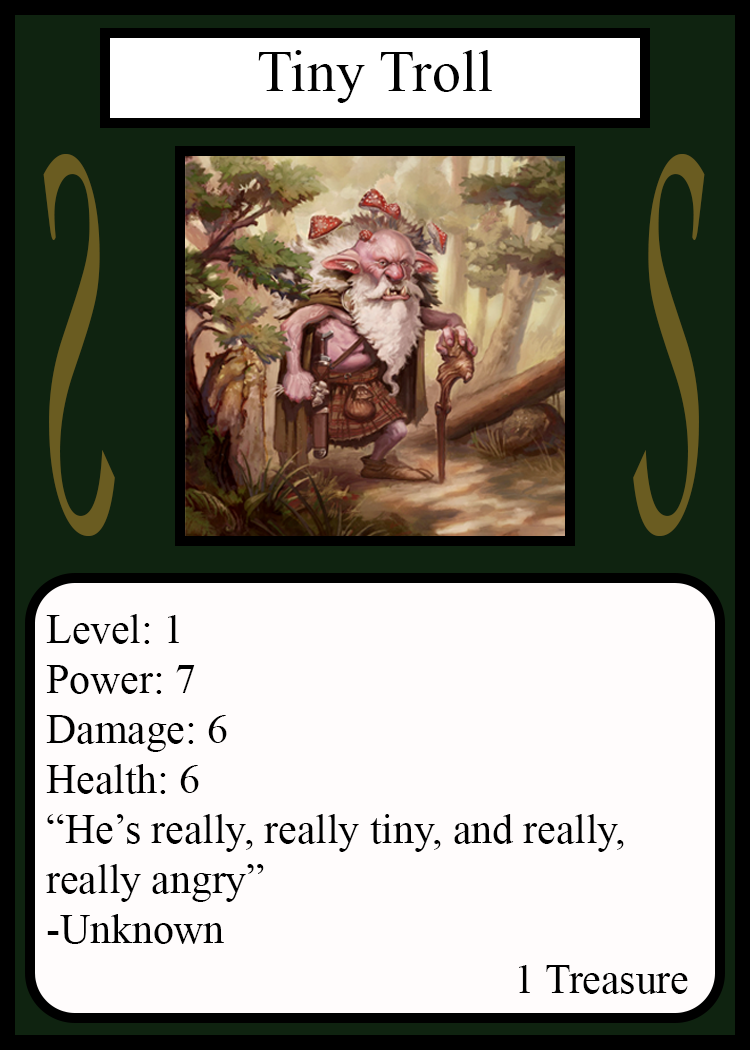
<style>
.page{position:relative;width:750px;height:1050px;background:#fffcfc}
.page>*{position:absolute;margin:0}
.t1{font:58.3px "TimesNewRomanPSMT";color:#010101}
.t2{font:548.5px "Apple-Chancery";color:#6a5c21;scale:0.27 1}
.t3{font:548.2px "Apple-Chancery";color:#6a5c21;scale:0.27 1}
.t4{font:41.7px "TimesNewRomanPSMT";color:#000000}
</style>
<div class="page">
<p class="t1" style="left:258px;top:50px;width:234px;height:53px">Tiny Troll</p>
<p class="t2" style="left:43px;top:154px;width:72px;height:382px;rotate:180deg">S</p>
<p class="t3" style="left:633px;top:154px;width:72px;height:382px">S</p>
<p class="t4" style="left:46px;top:614px;width:642px;height:380px">Level: 1<br>Power: 7<br>Damage: 6<br>Health: 6<br>“He’s really, really tiny, and really,<br>really angry” <br>-Unknown<br>             1 Treasure</p>
</div>
